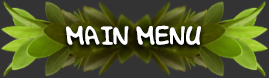
<style>
.page{position:relative;width:269px;height:78px;background:#333333}
.page>*{position:absolute;margin:0}
.t1{font:27.9px "Foma_flibustier";color:#ffffff}
</style>
<div class="page">
<p class="t1" style="left:66px;top:25px;width:135px;height:20px">MAIN MENU</p>
</div>
